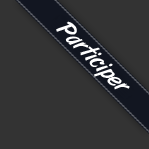
<style>
.page{position:relative;width:149px;height:149px;background:#333333}
.page>*{position:absolute;margin:0}
.t1{font:24px "ArtBrush";color:#ffffff}
</style>
<div class="page">
<p class="t1" style="left:56px;top:21px;width:74px;height:69px;rotate:45deg">Participer</p>
</div>
